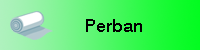
<style>
.page{position:relative;width:200px;height:50px}
.page>*{position:absolute;margin:0}
.t1{font:18px "Swiss721BT-Roman";color:#000000}
</style>
<div class="page">
<p class="t1" style="left:86px;top:19px;width:56px;height:13px">Perban</p>
</div>
